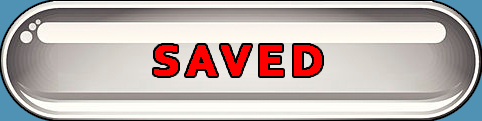
<style>
.page{position:relative;width:482px;height:121px}
.page>*{position:absolute;margin:0}
.t1{font:45.8px "Corbel-Bold";letter-spacing:0.13em;color:#ff0000;font-weight:bold}
</style>
<div class="page">
<p class="t1" style="left:154px;top:45px;width:168px;height:31px">SAVED</p>
</div>
